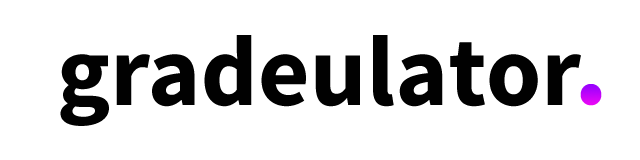
<style>
.page{position:relative;width:640px;height:160px;background:#ffffff}
.page>*{position:absolute;margin:0}
.t1{font:100px "SourceSansPro-Bold";color:#010101}
.t2{font:115px "SourceSansPro-Bold"}
</style>
<div class="page">
<p class="t1" style="left:60px;top:35px;width:521px;height:91px">gradeulator</p>
<p class="t2" style="left:580px;top:84px;width:22px;height:22px">.</p>
</div>
